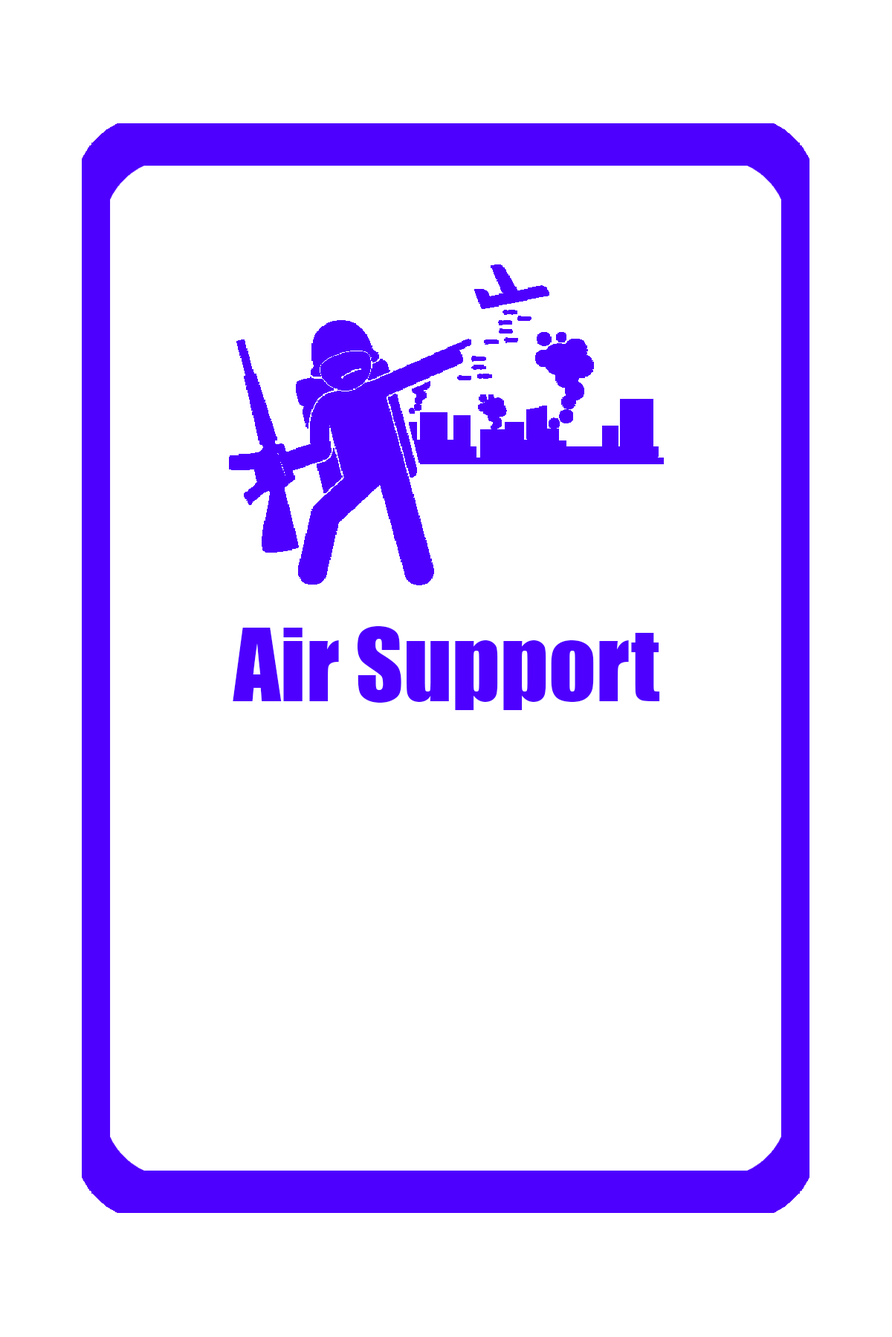
<style>
.page{position:relative;width:892px;height:1337px;background:#ffffff}
.page>*{position:absolute;margin:0}
.t1{font:92.9px "Impact";color:#4e00ff}
</style>
<div class="page">
<p class="t1" style="left:233px;top:626px;width:427px;height:84px">Air Support</p>
</div>
